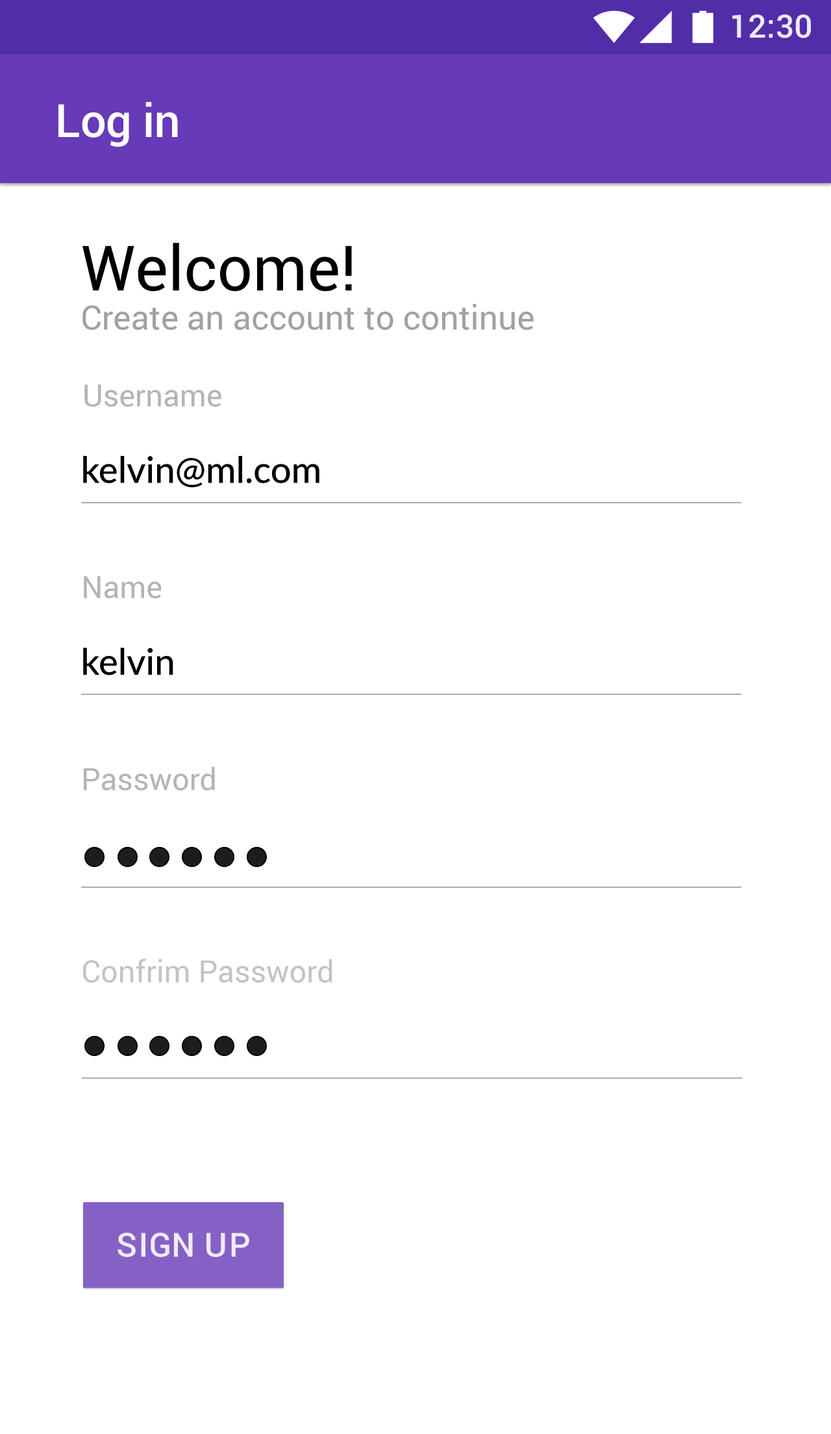
<style>
.page{position:relative;width:831px;height:1434px;background:#ffffff}
.page>*{position:absolute;margin:0}
.t1{font:32.2px "Roboto-Medium";color:#eeeaf6}
.t2{font:46px "Roboto-Medium";color:#ffffff}
.t3{font:62.5px "Roboto-Regular";color:#000000}
.t4{font:33.6px "Roboto-Regular";color:#a1a1a1}
.t5{font:30.5px "Roboto-Regular";color:#a1a1a1}
.t6{font:36.6px "Lato-Medium";color:#000000}
.t7{font:30.5px "Roboto-Regular";color:#b4b4b4}
.t8{font:33.3px "Roboto-Medium";letter-spacing:0.03em;color:#ffffff}
</style>
<div class="page">
<p class="t1" style="left:733px;top:14px;width:78px;height:24px">12:30</p>
<p class="t2" style="left:58px;top:102px;width:120px;height:45px">Log in</p>
<p class="t3" style="left:82px;top:243px;width:270px;height:49px">Welcome!</p>
<p class="t4" style="left:82px;top:304px;width:452px;height:26px">Create an account to continue</p>
<p class="t5" style="left:84px;top:385px;width:137px;height:22px;opacity:0.8">Username</p>
<p class="t6" style="left:83px;top:456px;width:237px;height:32px">kelvin@ml.com</p>
<p class="t5" style="left:84px;top:576px;width:78px;height:23px;opacity:0.8">Name</p>
<p class="t6" style="left:83px;top:648px;width:90px;height:28px">kelvin</p>
<p class="t5" style="left:84px;top:766px;width:131px;height:25px;opacity:0.8">Password</p>
<p class="t7" style="left:83px;top:959px;width:250px;height:24px;opacity:0.8">Confrim Password</p>
<p class="t8" style="left:118px;top:1233px;width:131px;height:25px;opacity:0.87">SIGN UP</p>
</div>
